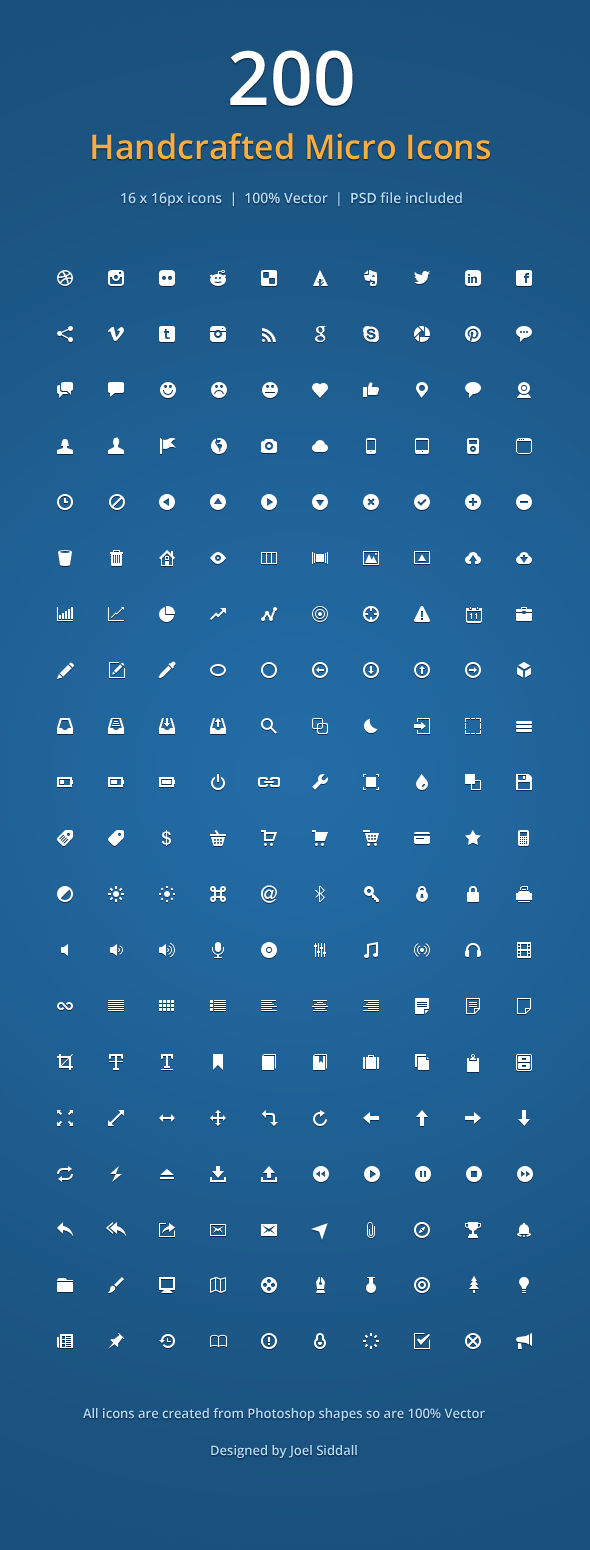
<style>
.page{position:relative;width:590px;height:1550px}
.page>*{position:absolute;margin:0}
.t1{font:75px "OpenSans-Semibold";color:#ffffff}
.t2{font:34px "OpenSans-Semibold";color:#f9ad3f}
.t3{font:14px "OpenSans-Semibold";color:#b6defd}
.t4{font:13px/32px "OpenSans-Semibold";color:#b6defd}
</style>
<div class="page">
<p class="t1" style="left:230px;top:50px;width:123px;height:56px">200</p>
<p class="t2" style="left:92px;top:133px;width:398px;height:27px">Handcrafted Micro Icons</p>
<p class="t3" style="left:121px;top:192px;width:341px;height:15px">16 x 16px icons  |  100% Vector  |  PSD file included</p>
<p class="t4" style="left:83px;top:1408px;width:402px;height:50px;text-align:center">All icons are created from Photoshop shapes so are 100% Vector<br>Designed by Joel Siddall</p>
</div>
